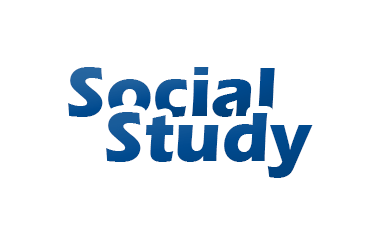
<style>
.page{position:relative;width:392px;height:231px;background:#ffffff}
.page>*{position:absolute;margin:0}
.t1{font:72px "ErasITC-Bold";color:#064e92}
.t2{font:72px "ErasITC-Bold";color:#014b8f}
</style>
<div class="page">
<p class="t1" style="left:68px;top:67px;width:207px;height:50px">Social</p>
<p class="t2" style="left:106px;top:112px;width:207px;height:66px">Study</p>
</div>
